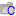
<style>
.page{position:relative;width:16px;height:16px;background:#ffffff}
.page>*{position:absolute;margin:0}
.t1{font:12px "NewsGothicMT";color:#1b17ed}
</style>
<div class="page">
<p class="t1" style="left:7px;top:6px;width:8px;height:9px">C</p>
</div>
